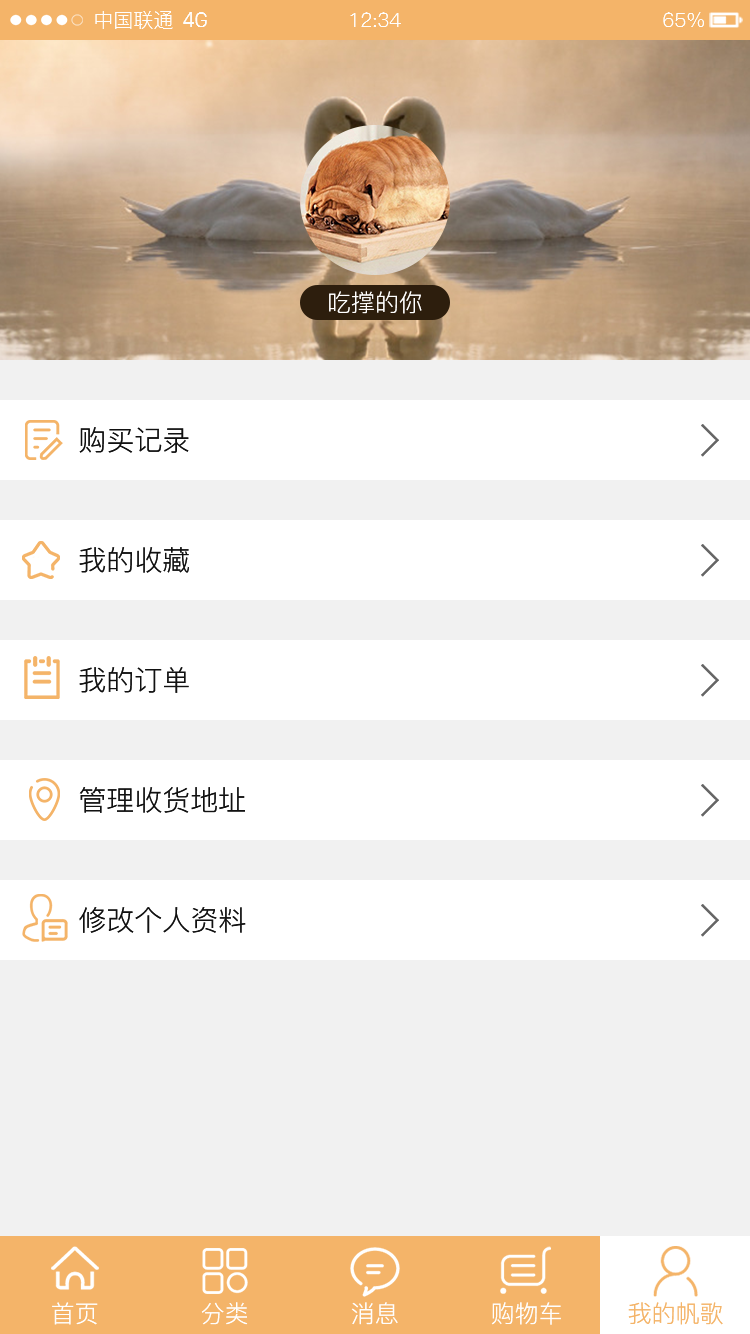
<style>
.page{position:relative;width:750px;height:1334px;background:#f1f1f1}
.page>*{position:absolute;margin:0}
.t1{font:20px "PingFang-SC-Regular";color:#fefefe}
.t2{font:20px "SanFranciscoDisplay";color:#fefefe}
.t3{font:24px "PingFang-SC-Regular";color:#ffffff}
.t4{font:28px "PingFang-SC-Regular";color:#111111}
.t5{font:24px "PingFang-SC-Regular";color:#fefefe}
.t6{font:24px "PingFang-SC-Regular";color:#f4b469}
</style>
<div class="page">
<p class="t1" style="left:95px;top:11px;width:78px;height:18px">中国联通</p>
<p class="t2" style="left:183px;top:12px;width:24px;height:15px">4G</p>
<p class="t1" style="left:350px;top:12px;width:51px;height:15px">12:34</p>
<p class="t1" style="left:663px;top:12px;width:41px;height:15px">65%</p>
<p class="t3" style="left:329px;top:291px;width:93px;height:23px">吃撑的你</p>
<p class="t4" style="left:79px;top:427px;width:110px;height:26px">购买记录</p>
<p class="t4" style="left:79px;top:547px;width:110px;height:26px">我的收藏</p>
<p class="t4" style="left:79px;top:667px;width:110px;height:26px">我的订单</p>
<p class="t4" style="left:79px;top:787px;width:166px;height:26px">管理收货地址</p>
<p class="t4" style="left:79px;top:907px;width:167px;height:26px">修改个人资料</p>
<p class="t5" style="left:52px;top:1302px;width:46px;height:23px">首页</p>
<p class="t5" style="left:201px;top:1302px;width:47px;height:23px">分类</p>
<p class="t5" style="left:351px;top:1302px;width:47px;height:23px">消息</p>
<p class="t5" style="left:491px;top:1302px;width:70px;height:23px">购物车</p>
<p class="t6" style="left:628px;top:1302px;width:95px;height:23px">我的帆歌</p>
</div>
